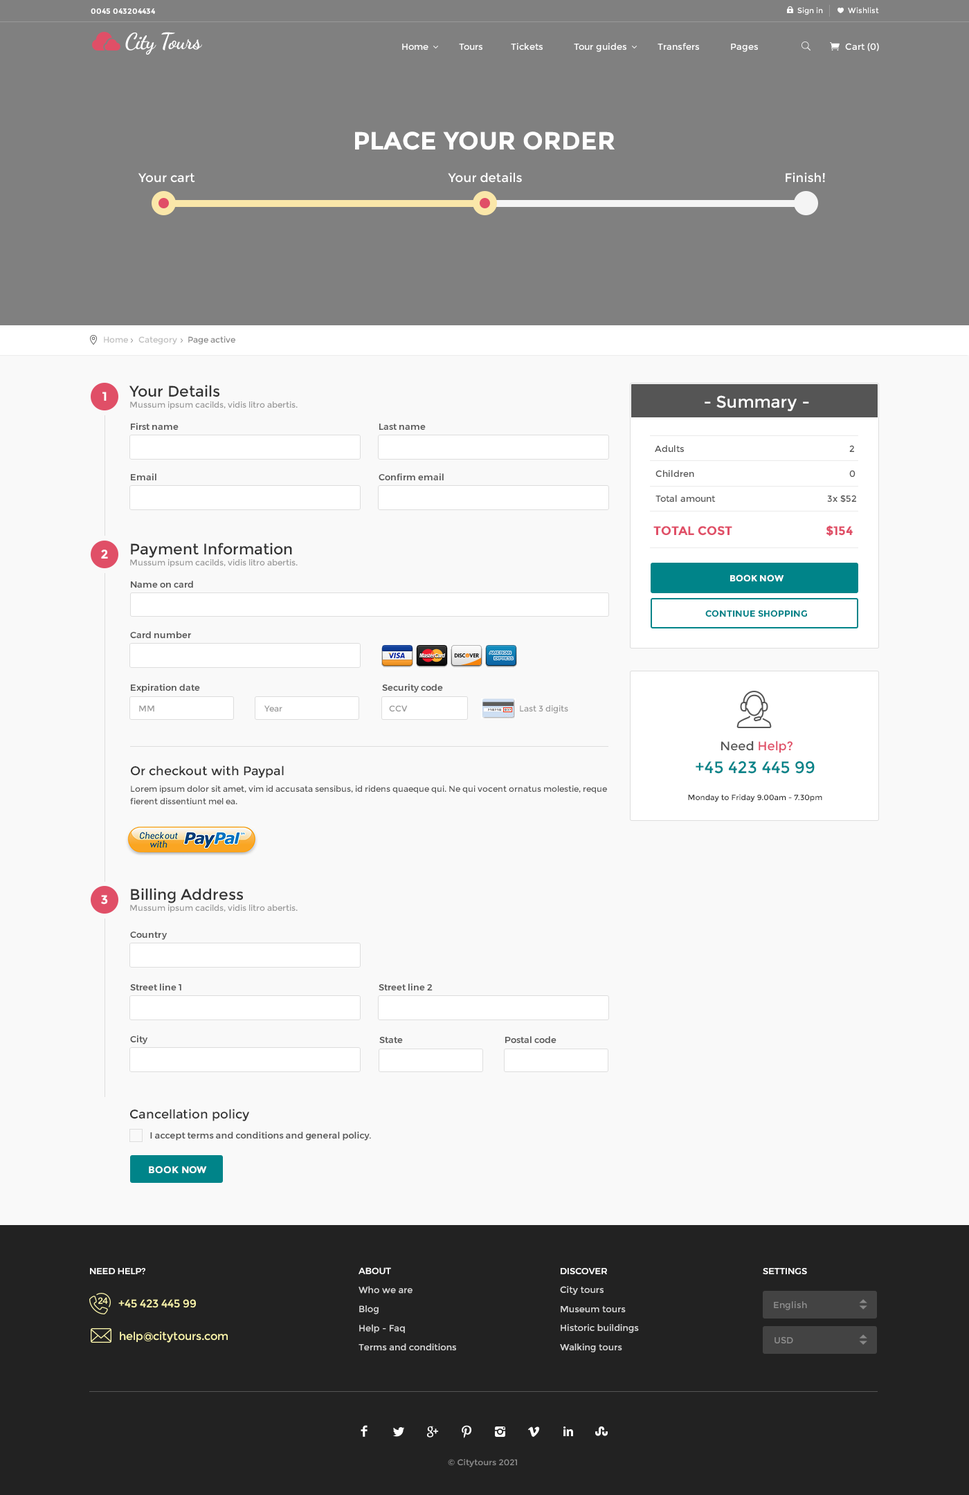
<style>
.page{position:relative;width:969px;height:1495px;background:#f9f9f9}
.page>*{position:absolute;margin:0}
.t1{font:7.6px "Montserrat-Bold";color:#ffffff}
.t2{font:7.6px "Montserrat-Regular";color:#ffffff}
.t3{font:22.2px "DancingScript-Bold";letter-spacing:-0.025em;color:#ffffff}
.t4{font:9px "Montserrat-Regular";color:#ffffff}
.t5{font:24.9px "Montserrat-Bold";color:#ffffff}
.t6{font:12.5px "Montserrat-Regular";color:#ffffff}
.t7{font:8.3px "Montserrat-Regular";color:#bebebe}
.t8{font:8.3px "Montserrat-Regular";color:#888888}
.t9{font:8.3px/11.1px "Montserrat-Regular";color:#999999}
.t10{font:15.2px/9.7px "Montserrat-Regular";color:#333333}
.t11{font:12.5px "Montserrat-Bold";color:#ffffff;text-transform:uppercase}
.t12{font:16.6px "Montserrat-Regular";color:#ffffff}
.t13{font:9px "Montserrat-Medium";color:#555555}
.t14{font:9px/24.9px "Montserrat-Regular";color:#555555}
.t15{font:8.3px/24.9px "Montserrat-Regular";color:#555555}
.t16{font:12.5px/33.2px "Montserrat-Bold";color:#e04f67}
.t17{font:9px "Montserrat-Bold";color:#ffffff;text-transform:uppercase}
.t18{font:9px "Montserrat-Bold";color:#008489;text-transform:uppercase}
.t19{font:8.3px "Montserrat-Regular";color:#999999}
.t20{font:12.5px "Montserrat-Regular";color:#e04f67}
.t21{font:12.5px "Montserrat-Regular";color:#555555}
.t22{font:16.6px "Montserrat-Regular";color:#008489}
.t23{font:8.3px/16.6px "Montserrat-Regular";color:#555555}
.t24{font:12.5px/12.5px "Montserrat-Regular";color:#333333}
.t25{font:8.3px/12.5px "Montserrat-Regular";color:#555555}
.t26{font:7.6px "Montserrat-Regular";color:#333333}
.t27{font:12.5px "Montserrat-Regular";color:#333333}
.t28{font:9.7px "Montserrat-Bold";color:#ffffff;text-transform:uppercase}
.t29{font:9px "Montserrat-Medium";color:#ffffff;text-transform:uppercase}
.t30{font:9px "Montserrat-Regular";color:#d8d8d8}
.t31{font:9px/8.3px "Montserrat-Medium";color:#ffffff;text-transform:uppercase}
.t32{font:11.1px "Montserrat-Regular";color:#fdf7ac}
.t33{font:9px "Montserrat-Regular";color:#8e8e8e}
.t34{font:8.2px "Montserrat-Regular";color:#8c8c8c;scale:1.04 1}
</style>
<div class="page">
<p class="t1" style="left:91px;top:8px;width:64px;height:6px">0045 043204434</p>
<p class="t2" style="left:798px;top:7px;width:81px;height:8px">Sign in            Wishlist</p>
<p class="t3" style="left:125px;top:32px;width:77px;height:23px">City Tours</p>
<p class="t4" style="left:402px;top:43px;width:356px;height:9px">Home           Tours          Tickets           Tour guides           Transfers           Pages</p>
<p class="t4" style="left:845px;top:43px;width:34px;height:8px">Cart (0)</p>
<p class="t5" style="left:355px;top:132px;width:260px;height:18px">PLACE YOUR ORDER</p>
<p class="t6" style="left:138px;top:173px;width:57px;height:10px">Your cart</p>
<p class="t6" style="left:448px;top:172px;width:74px;height:11px">Your details</p>
<p class="t6" style="left:786px;top:172px;width:39px;height:11px">Finish!</p>
<p class="t7" style="left:104px;top:336px;width:131px;height:9px">Home     Category     <span class="t8">Page active</span></p>
<p class="t9" style="left:129px;top:385px;width:169px;height:25px"><span class="t10">Your Details<br></span>Mussum ipsum cacilds, vidis litro abertis.</p>
<p class="t11" style="left:102px;top:392px;width:5px;height:9px">1</p>
<p class="t12" style="left:705px;top:395px;width:104px;height:16px">- Summary -</p>
<p class="t13" style="left:131px;top:423px;width:48px;height:7px">First name</p>
<p class="t13" style="left:379px;top:424px;width:47px;height:6px">Last name</p>
<p class="t14" style="left:654px;top:445px;width:202px;height:92px"><span class="t15"> </span> Adults               2<br>  Children               0<br>  Total amount                                      3x $52<br><span class="t16"> TOTAL COST                       $154</span></p>
<p class="t13" style="left:131px;top:474px;width:25px;height:6px">Email</p>
<p class="t13" style="left:379px;top:474px;width:65px;height:7px">Confirm email</p>
<p class="t9" style="left:130px;top:543px;width:168px;height:25px"><span class="t10">Payment Information<br></span>Mussum ipsum cacilds, vidis litro abertis.</p>
<p class="t11" style="left:101px;top:550px;width:7px;height:9px">2</p>
<p class="t13" style="left:131px;top:581px;width:62px;height:7px">Name on card</p>
<p class="t17" style="left:730px;top:575px;width:54px;height:7px">book now</p>
<p class="t18" style="left:705px;top:610px;width:102px;height:7px">Continue shopping</p>
<p class="t13" style="left:130px;top:631px;width:61px;height:8px">Card number</p>
<p class="t13" style="left:131px;top:684px;width:69px;height:9px">Expiration date</p>
<p class="t13" style="left:382px;top:684px;width:61px;height:9px">Security code</p>
<p class="t19" style="left:139px;top:705px;width:15px;height:7px">MM</p>
<p class="t19" style="left:264px;top:705px;width:18px;height:7px">Year</p>
<p class="t19" style="left:389px;top:705px;width:19px;height:7px">CCV</p>
<p class="t19" style="left:520px;top:705px;width:48px;height:9px">Last 3 digits</p>
<p class="t20" style="left:721px;top:741px;width:72px;height:12px"><span class="t21">Need</span> Help?</p>
<p class="t22" style="left:696px;top:761px;width:119px;height:13px">+45 423 445 99</p>
<p class="t23" style="left:130px;top:766px;width:477px;height:38px"><span class="t24">Or checkout with Paypal<br></span>Lorem ipsum dolor sit amet, vim id accusata sensibus, id ridens quaeque qui. Ne qui vocent ornatus molestie, reque <span class="t25">fierent dissentiunt mel ea.</span></p>
<p class="t26" style="left:688px;top:794px;width:134px;height:8px">Monday to Friday 9.00am - 7.30pm</p>
<p class="t9" style="left:130px;top:888px;width:168px;height:25px"><span class="t10">Billing Address<br></span>Mussum ipsum cacilds, vidis litro abertis.</p>
<p class="t11" style="left:101px;top:895px;width:7px;height:10px">3</p>
<p class="t13" style="left:130px;top:932px;width:38px;height:8px">Country</p>
<p class="t13" style="left:130px;top:984px;width:51px;height:7px">Street line 1</p>
<p class="t13" style="left:379px;top:984px;width:54px;height:7px">Street line 2</p>
<p class="t13" style="left:130px;top:1036px;width:18px;height:9px">City</p>
<p class="t13" style="left:379px;top:1037px;width:24px;height:7px">State</p>
<p class="t13" style="left:505px;top:1036px;width:52px;height:7px">Postal code</p>
<p class="t27" style="left:130px;top:1109px;width:120px;height:13px">Cancellation policy</p>
<p class="t13" style="left:150px;top:1132px;width:221px;height:9px">I accept terms and conditions and general policy.</p>
<p class="t28" style="left:149px;top:1167px;width:58px;height:6px">book now</p>
<p class="t29" style="left:90px;top:1268px;width:55px;height:7px">Need help?</p>
<p class="t30" style="left:359px;top:1268px;width:97px;height:83px"><span class="t31">About<br></span>Who we are<br>Blog<br>Help - Faq<br>Terms and conditions</p>
<p class="t30" style="left:560px;top:1268px;width:79px;height:85px"><span class="t31">Discover<br></span>City tours<br>Museum tours<br>Historic buildings<br>Walking tours</p>
<p class="t29" style="left:763px;top:1268px;width:44px;height:7px">Settings</p>
<p class="t32" style="left:118px;top:1299px;width:78px;height:9px">+45 423 445 99</p>
<p class="t33" style="left:774px;top:1302px;width:33px;height:9px">English</p>
<p class="t32" style="left:120px;top:1331px;width:108px;height:12px">help@citytours.com</p>
<p class="t33" style="left:775px;top:1337px;width:18px;height:7px">USD</p>
<p class="t34" style="left:448px;top:1459px;width:69px;height:9px">© Citytours 2021</p>
</div>
